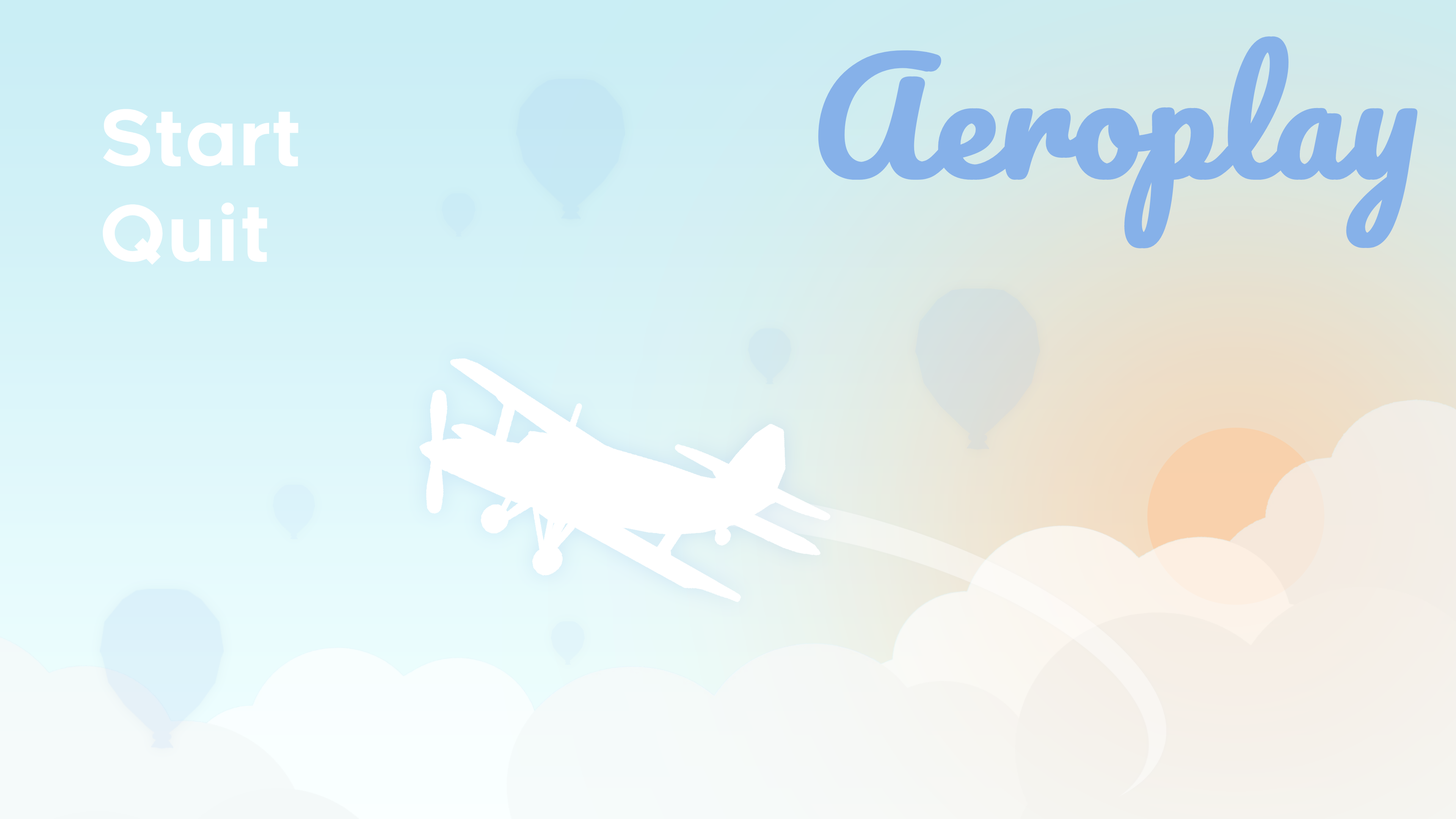
<style>
.page{position:relative;width:1456px;height:819px}
.page>*{position:absolute;margin:0}
.t1{font:151.7px "Pacifico-Regular";color:#86b1e9;font-weight:bold}
.t2{font:75.8px "Renogare-Regular";color:#ffffff}
</style>
<div class="page">
<p class="t1" style="left:818px;top:36px;width:600px;height:212px">Aeroplay</p>
<p class="t2" style="left:103px;top:109px;width:195px;height:57px">Start</p>
<p class="t2" style="left:103px;top:202px;width:164px;height:63px">Quit</p>
</div>
